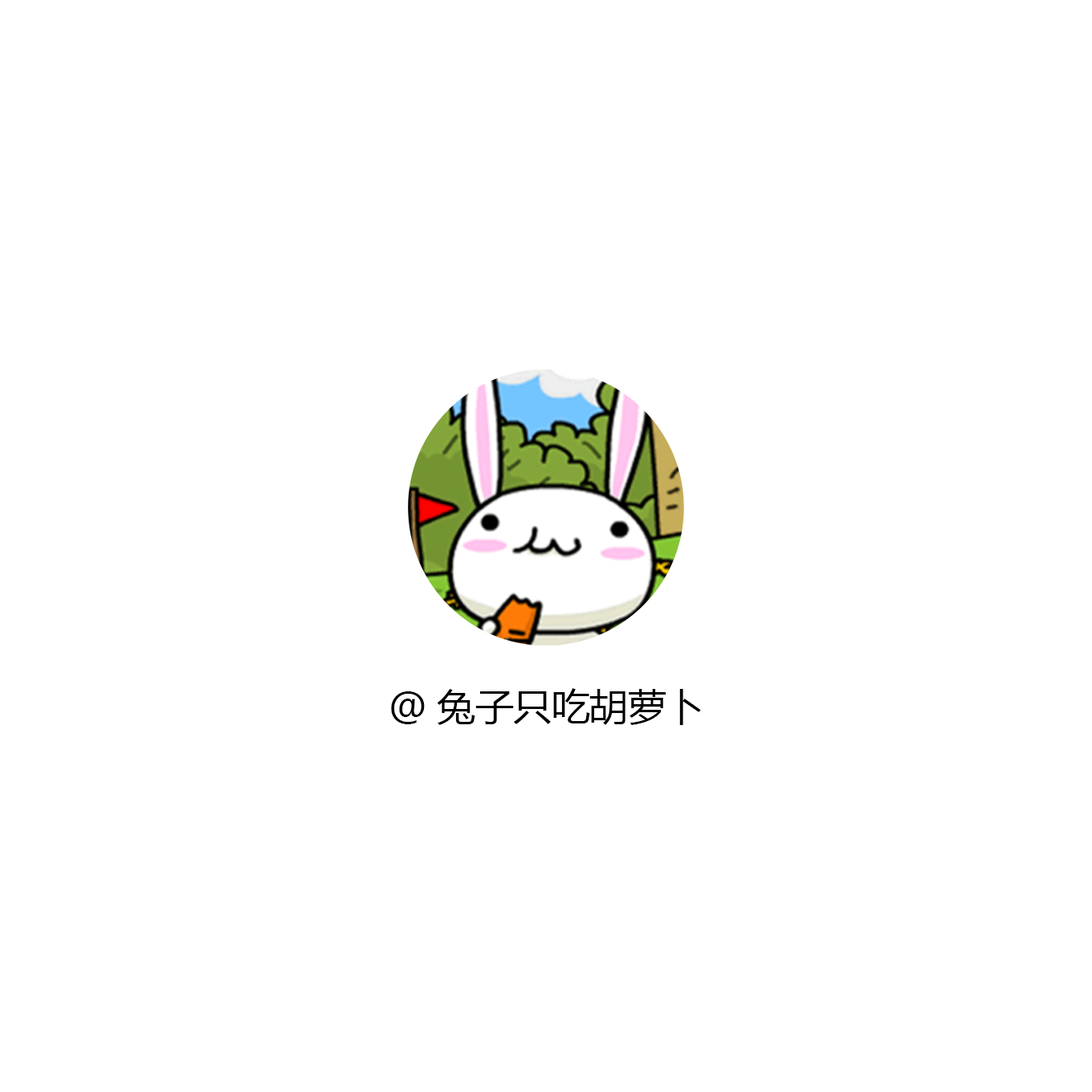
<style>
.page{position:relative;width:1092px;height:1092px;background:#ffffff}
.page>*{position:absolute;margin:0}
.t1{font:38.1px "MicrosoftYaHei";color:#000000}
</style>
<div class="page">
<p class="t1" style="left:391px;top:688px;width:310px;height:37px">@兔子只吃胡萝卜</p>
</div>
